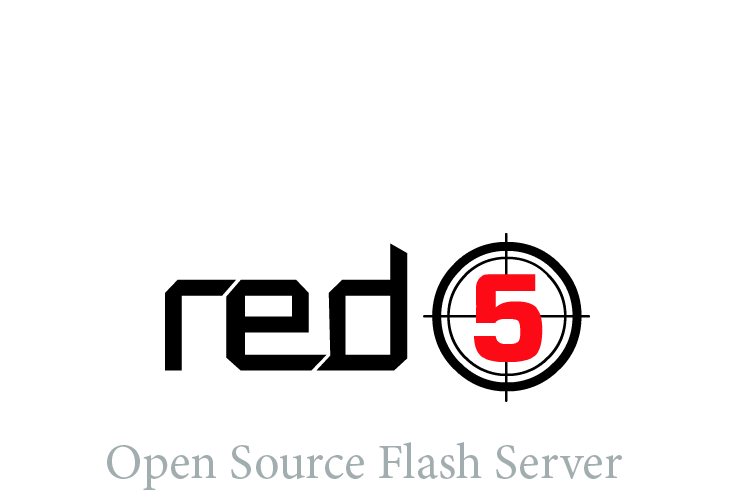
<style>
.page{position:relative;width:750px;height:500px;background:#ffffff}
.page>*{position:absolute;margin:0}
.t1{font:50px "MinionPro-Regular";color:#a2adaf}
</style>
<div class="page">
<p class="t1" style="left:107px;top:442px;width:515px;height:48px">Open Source Flash Server</p>
</div>
